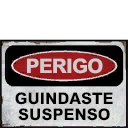
<style>
.page{position:relative;width:128px;height:128px;background:#ffffff}
.page>*{position:absolute;margin:0}
.t1{font:20px "MHeiPRC-Xbold";letter-spacing:-0.04em;color:#cecbce}
.t2{font:16px "MHeiPRC-Xbold";color:#000000}
</style>
<div class="page">
<p class="t1" style="left:27px;top:58px;width:76px;height:16px">PERIGO</p>
<p class="t2" style="left:15px;top:92px;width:98px;height:13px">GUINDASTE</p>
<p class="t2" style="left:18px;top:108px;width:92px;height:13px">SUSPENSO</p>
</div>
